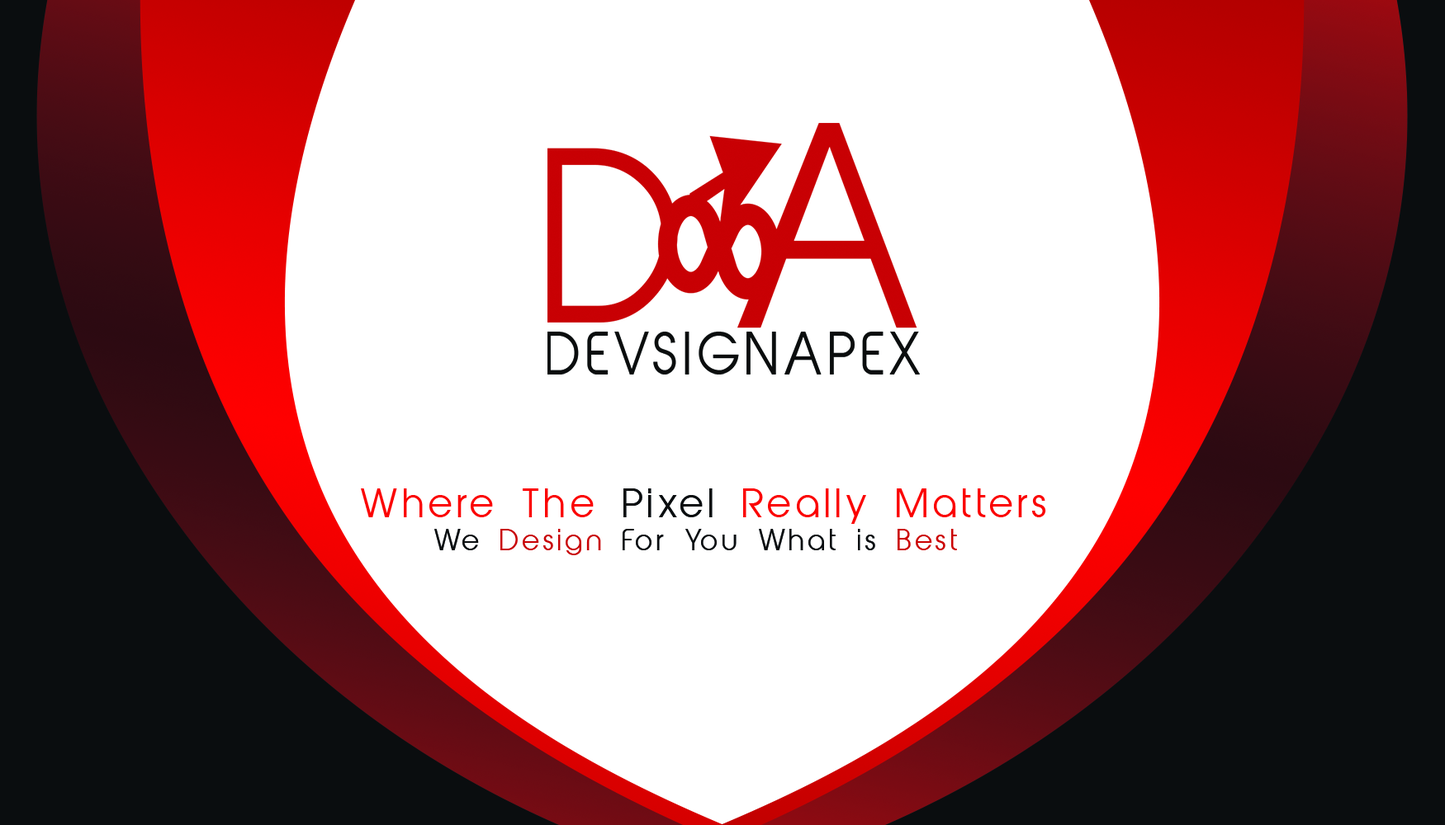
<style>
.page{position:relative;width:1445px;height:825px;background:#ffffff}
.page>*{position:absolute;margin:0}
.t1{font:63.1px "AbeatbyKai";letter-spacing:0.13em;color:#fb0000}
.t2{font:63.1px "AbeatbyKai";letter-spacing:0.13em;color:#0a0d0f}
.t3{font:45.9px "AbeatbyKai";letter-spacing:0.13em;color:#0a0d0f}
.t4{font:45.9px "AbeatbyKai";letter-spacing:0.13em;color:#c80004}
.t5{font:45.9px "AbeatbyKai";letter-spacing:0.13em;color:#cb0000}
</style>
<div class="page">
<p class="t1" style="left:361px;top:489px;width:685px;height:35px">Where The <span class="t2">Pixel </span>Really Matters</p>
<p class="t3" style="left:434px;top:529px;width:523px;height:27px">We <span class="t4">Design </span>For You What is <span class="t5">Best</span></p>
</div>
